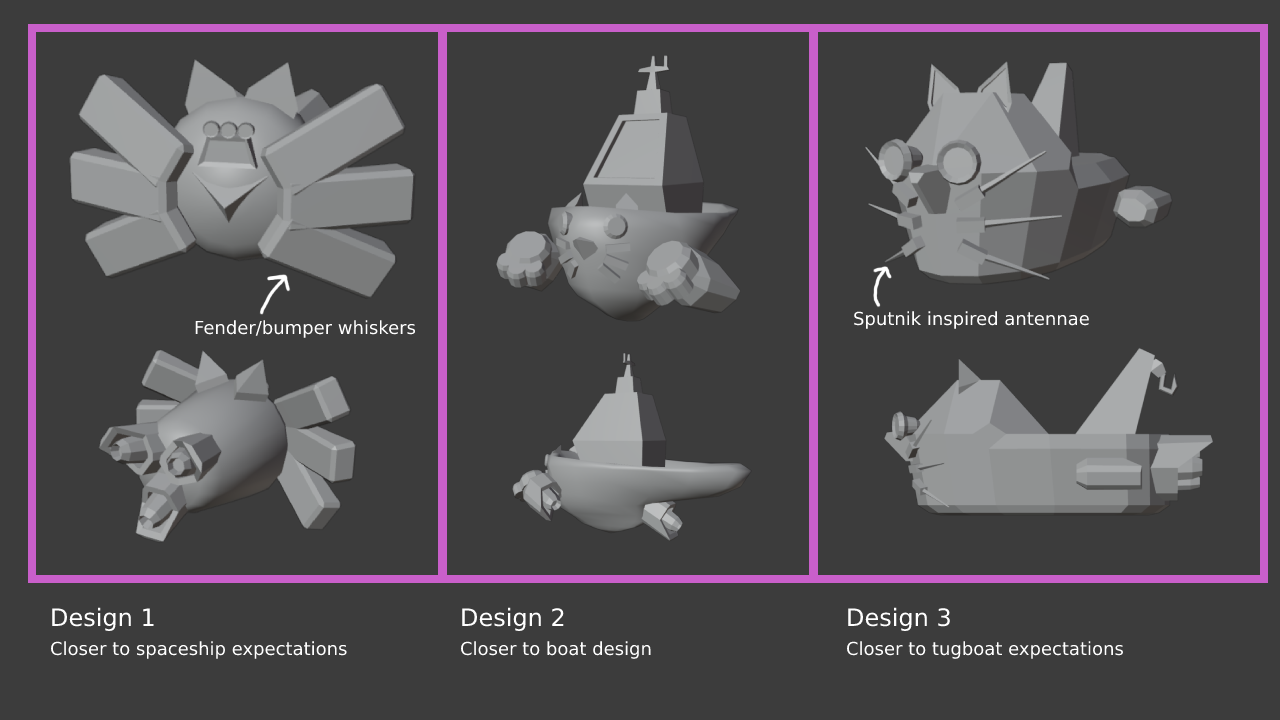
<style>
.page{position:relative;width:1280px;height:720px;background:#3c3c3c}
.page>*{position:absolute;margin:0}
.t1{font:18px "DejaVuSans";color:#ffffff}
.t2{font:24px "DejaVuSans";color:#ffffff}
</style>
<div class="page">
<p class="t1" style="left:854px;top:311px;width:235px;height:18px">Sputnik inspired antennae</p>
<p class="t1" style="left:195px;top:320px;width:221px;height:18px">Fender/bumper whiskers</p>
<p class="t1" style="left:51px;top:607px;width:296px;height:52px"><span class="t2">Design 1<br></span>Closer to spaceship expectations</p>
<p class="t1" style="left:461px;top:607px;width:190px;height:52px"><span class="t2">Design 2<br></span>Closer to boat design</p>
<p class="t1" style="left:847px;top:607px;width:276px;height:52px"><span class="t2">Design 3<br></span>Closer to tugboat expectations</p>
</div>
